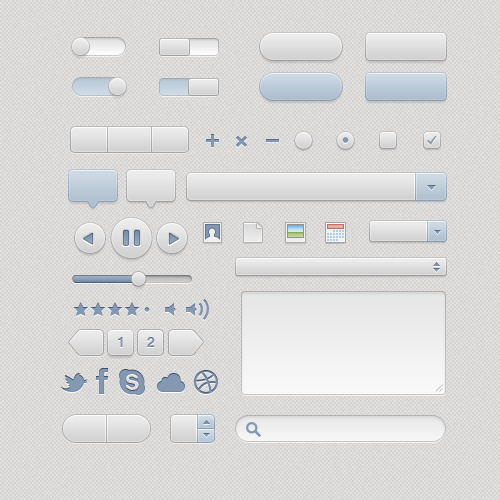
<style>
.page{position:relative;width:500px;height:500px}
.page>*{position:absolute;margin:0}
.t1{font:14px "Helvetica-Bold";color:#8598b2}
</style>
<div class="page">
<p class="t1" style="left:118px;top:337px;width:5px;height:10px">1</p>
<p class="t1" style="left:147px;top:337px;width:8px;height:10px">2</p>
</div>
